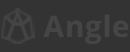
<style>
.page{position:relative;width:130px;height:52px;background:#333333}
.page>*{position:absolute;margin:0}
.t1{font:29.5px "OpenSans-Bold";letter-spacing:0.025em;color:#454546}
</style>
<div class="page">
<p class="t1" style="left:43px;top:14px;width:86px;height:30px">Angle</p>
</div>
